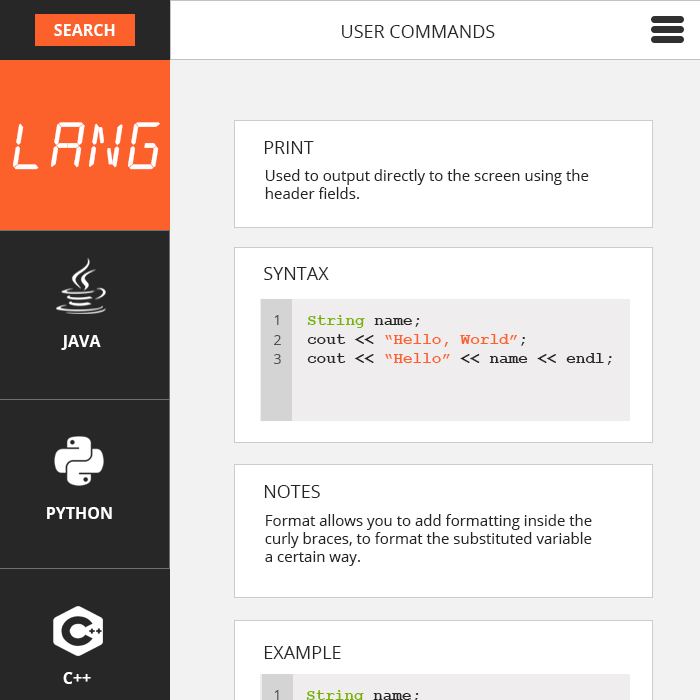
<style>
.page{position:relative;width:700px;height:700px;background:#ffffff}
.page>*{position:absolute;margin:0}
.t1{font:16px "OpenSans-Bold";color:#ffffff}
.t2{font:18px "OpenSans";color:#272727}
.t3{font:66.4px "alarmclock";color:#ffffff}
.t4{font:18px "OpenSans";color:#262626}
.t5{font:15px "OpenSans";color:#262626}
.t6{font:14px "OpenSans";color:#545353}
.t7{font:16px "CourierNewPS-BoldMT";color:#262626}
.t8{font:16px "CourierNewPS-BoldMT";color:#7ab201}
.t9{font:16px "CourierNewPS-BoldMT";color:#fd612b}
</style>
<div class="page">
<p class="t1" style="left:54px;top:24px;width:61px;height:12px">SEARCH</p>
<p class="t2" style="left:342px;top:25px;width:153px;height:13px">USER COMMANDS</p>
<p class="t3" style="left:13px;top:122px;width:147px;height:48px">LANG</p>
<p class="t4" style="left:264px;top:141px;width:50px;height:13px">PRINT</p>
<p class="t5" style="left:265px;top:169px;width:324px;height:30px">Used to output directly to the screen using the <br>header fields.</p>
<p class="t4" style="left:264px;top:267px;width:65px;height:13px">SYNTAX</p>
<p class="t6" style="left:274px;top:315px;width:5px;height:10px">1</p>
<p class="t7" style="left:307px;top:315px;width:305px;height:50px"><span class="t8">String </span>name;<br>cout &lt;&lt; <span class="t9">“Hello, World”</span>;<br>cout &lt;&lt; <span class="t9">“Hello”</span> &lt;&lt; name &lt;&lt; endl;</p>
<p class="t1" style="left:61px;top:335px;width:40px;height:15px">JAVA</p>
<p class="t6" style="left:274px;top:335px;width:7px;height:10px">2</p>
<p class="t6" style="left:274px;top:354px;width:7px;height:10px">3</p>
<p class="t4" style="left:264px;top:485px;width:56px;height:13px">NOTES</p>
<p class="t1" style="left:47px;top:507px;width:65px;height:12px">PYTHON</p>
<p class="t5" style="left:265px;top:514px;width:327px;height:52px">Format allows you to add formatting inside the <br>curly braces, to format the substituted variable <br>a certain way.</p>
<p class="t4" style="left:264px;top:646px;width:77px;height:13px">EXAMPLE</p>
<p class="t1" style="left:63px;top:672px;width:28px;height:12px">C++</p>
<p class="t6" style="left:274px;top:690px;width:5px;height:10px">1</p>
</div>
